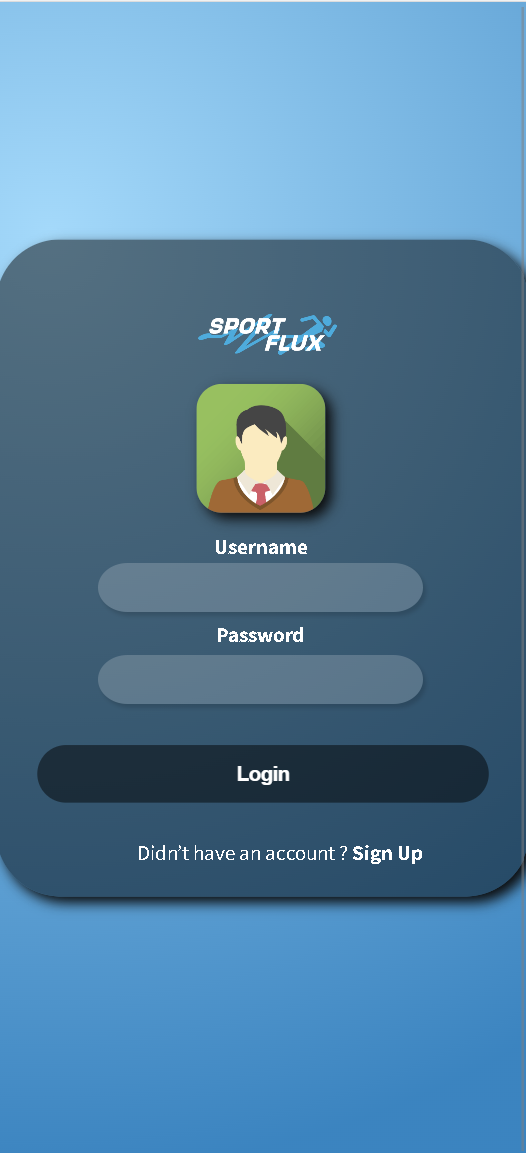
<style>
.page{position:relative;width:526px;height:1153px}
.page>*{position:absolute;margin:0}
.t1{font:21px "SourceSansPro-Bold";color:#ffffff}
.t2{font:21px "SourceSansPro-Regular";color:#ffffff}
</style>
<div class="page">
<p class="t1" style="left:216px;top:540px;width:91px;height:14px">Username</p>
<p class="t1" style="left:218px;top:627px;width:85px;height:15px">Password</p>
<p class="t2" style="left:139px;top:845px;width:283px;height:19px">Didn’t have an account ?<span class="t1"> Sign Up</span></p>
</div>
